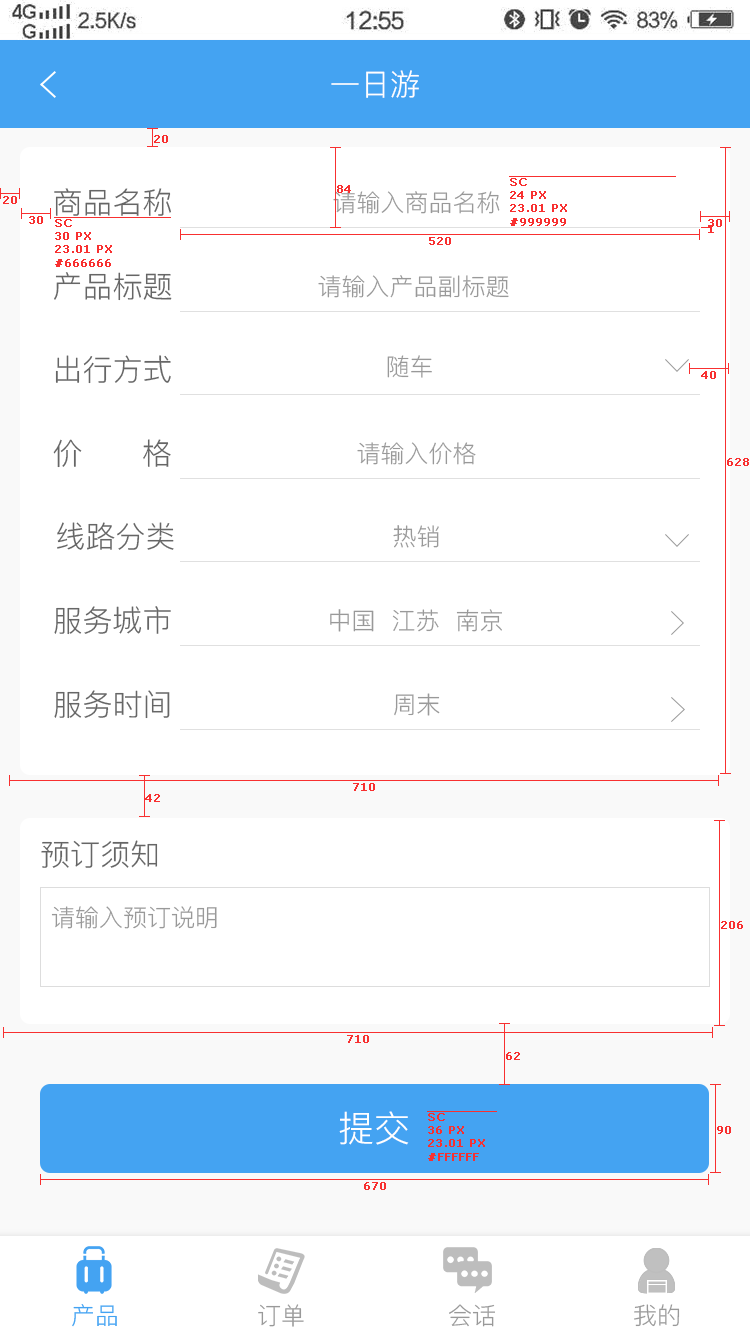
<style>
.page{position:relative;width:750px;height:1334px;background:#ffffff}
.page>*{position:absolute;margin:0}
.t1{font:30px "PingFang-SC-Regular";color:#ffffff;text-transform:uppercase}
.t2{font:11px "Verdana";color:#f83030;font-weight:bold}
.t3{font:30px "PingFang-SC-Regular";color:#666666;text-transform:uppercase}
.t4{font:24px "PingFang-SC-Regular";color:#999999;text-transform:uppercase}
.t5{font:36px "PingFang-SC-Regular";color:#ffffff;text-transform:uppercase}
.t6{font:24px "PingFang-SC-Regular";color:#44a3f2;text-transform:uppercase}
</style>
<div class="page">
<p class="t1" style="left:331px;top:70px;width:88px;height:28px">一日游</p>
<p class="t2" style="left:154px;top:135px;width:14px;height:8px">20</p>
<p class="t2" style="left:337px;top:185px;width:14px;height:8px">84</p>
<p class="t2" style="left:510px;top:178px;width:57px;height:48px">SC<br>24 PX<br>23.01 PX<br>#999999</p>
<p class="t2" style="left:3px;top:196px;width:14px;height:8px">20</p>
<p class="t3" style="left:54px;top:188px;width:117px;height:28px">商品名称</p>
<p class="t4" style="left:333px;top:191px;width:167px;height:23px">请输入商品名称</p>
<p class="t2" style="left:29px;top:216px;width:14px;height:8px">30</p>
<p class="t2" style="left:55px;top:219px;width:57px;height:48px">SC<br>30 PX<br>23.01 PX<br>#666666</p>
<p class="t2" style="left:708px;top:219px;width:14px;height:8px">30</p>
<p class="t2" style="left:708px;top:225px;width:6px;height:8px">1</p>
<p class="t2" style="left:429px;top:237px;width:22px;height:8px">520</p>
<p class="t3" style="left:54px;top:272px;width:118px;height:29px">产品标题</p>
<p class="t4" style="left:318px;top:275px;width:191px;height:23px">请输入产品副标题</p>
<p class="t3" style="left:55px;top:355px;width:116px;height:29px">出行方式</p>
<p class="t4" style="left:387px;top:355px;width:45px;height:23px">随车</p>
<p class="t2" style="left:701px;top:371px;width:15px;height:8px">40</p>
<p class="t3" style="left:53px;top:439px;width:118px;height:29px">价      格</p>
<p class="t4" style="left:357px;top:442px;width:119px;height:23px">请输入价格</p>
<p class="t2" style="left:727px;top:458px;width:22px;height:8px">628</p>
<p class="t3" style="left:57px;top:522px;width:117px;height:28px">线路分类</p>
<p class="t4" style="left:393px;top:525px;width:46px;height:23px">热销</p>
<p class="t3" style="left:54px;top:606px;width:117px;height:29px">服务城市</p>
<p class="t4" style="left:330px;top:609px;width:172px;height:23px">中国  江苏  南京</p>
<p class="t3" style="left:54px;top:690px;width:116px;height:29px">服务时间</p>
<p class="t4" style="left:394px;top:693px;width:46px;height:23px">周末</p>
<p class="t2" style="left:353px;top:783px;width:22px;height:8px">710</p>
<p class="t2" style="left:145px;top:794px;width:15px;height:8px">42</p>
<p class="t3" style="left:41px;top:840px;width:117px;height:28px">预订须知</p>
<p class="t4" style="left:51px;top:906px;width:166px;height:23px">请输入预订说明</p>
<p class="t2" style="left:721px;top:921px;width:22px;height:8px">206</p>
<p class="t2" style="left:347px;top:1035px;width:22px;height:8px">710</p>
<p class="t2" style="left:506px;top:1052px;width:14px;height:8px">62</p>
<p class="t5" style="left:339px;top:1111px;width:70px;height:34px">提交</p>
<p class="t2" style="left:428px;top:1113px;width:57px;height:48px">SC<br>36 PX<br>23.01 PX<br>#FFFFFF</p>
<p class="t2" style="left:717px;top:1126px;width:14px;height:8px">90</p>
<p class="t2" style="left:364px;top:1182px;width:22px;height:8px">670</p>
<p class="t6" style="left:72px;top:1304px;width:45px;height:23px">产品</p>
<p class="t4" style="left:258px;top:1304px;width:46px;height:23px">订单</p>
<p class="t4" style="left:449px;top:1304px;width:46px;height:23px">会话</p>
<p class="t4" style="left:634px;top:1304px;width:46px;height:23px">我的</p>
</div>
